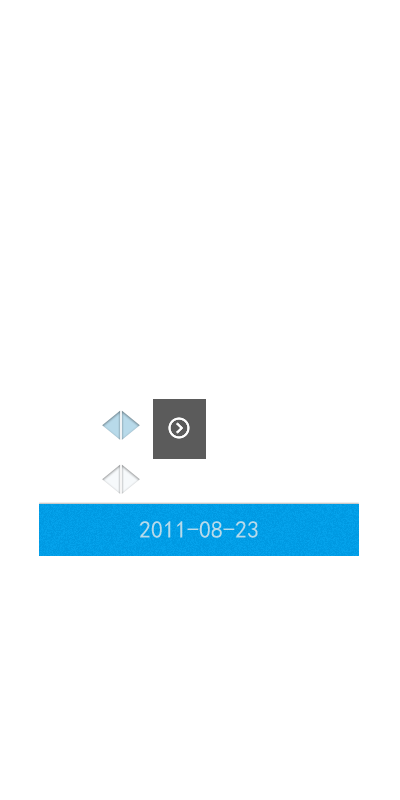
<style>
.page{position:relative;width:400px;height:800px;background:#ffffff}
.page>*{position:absolute;margin:0}
.t1{font:24px "SimHei";color:#b8daea}
</style>
<div class="page">
<p class="t1" style="left:139px;top:521px;width:119px;height:17px">2011-08-23</p>
</div>
